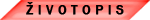
<style>
.page{position:relative;width:150px;height:20px}
.page>*{position:absolute;margin:0}
.t1{font:13px "FranklinGothic-Medium";letter-spacing:0.34em;color:#000000;text-transform:uppercase;font-weight:bold}
</style>
<div class="page">
<p class="t1" style="left:26px;top:2px;width:98px;height:13px">ŽIVOTOPIS</p>
</div>
